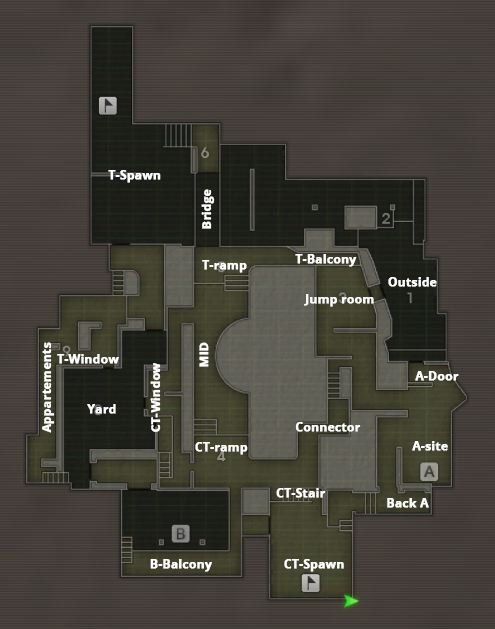
<style>
.page{position:relative;width:495px;height:629px}
.page>*{position:absolute;margin:0}
.t1{font:12px "OpenSans-Bold";color:#ffffff;font-weight:bold}
</style>
<div class="page">
<p class="t1" style="left:108px;top:170px;width:53px;height:13px">T-Spawn</p>
<p class="t1" style="left:201px;top:189px;width:14px;height:40px;rotate:-90deg">Bridge</p>
<p class="t1" style="left:295px;top:254px;width:62px;height:13px">T-Balcony</p>
<p class="t1" style="left:202px;top:260px;width:45px;height:13px">T-ramp</p>
<p class="t1" style="left:388px;top:277px;width:49px;height:10px">Outside</p>
<p class="t1" style="left:304px;top:294px;width:70px;height:13px">Jump room</p>
<p class="t1" style="left:42px;top:342px;width:13px;height:91px;rotate:-90deg">Appartements</p>
<p class="t1" style="left:199px;top:342px;width:10px;height:25px;rotate:-90deg">MID</p>
<p class="t1" style="left:57px;top:354px;width:62px;height:10px">T-Window</p>
<p class="t1" style="left:150px;top:363px;width:11px;height:69px;rotate:-90deg">CT-Window</p>
<p class="t1" style="left:415px;top:371px;width:44px;height:10px">A-Door</p>
<p class="t1" style="left:87px;top:404px;width:29px;height:10px">Yard</p>
<p class="t1" style="left:295px;top:422px;width:66px;height:10px">Connector</p>
<p class="t1" style="left:195px;top:442px;width:53px;height:13px">CT-ramp</p>
<p class="t1" style="left:412px;top:441px;width:36px;height:10px">A-site</p>
<p class="t1" style="left:276px;top:488px;width:50px;height:10px">CT-Stair</p>
<p class="t1" style="left:387px;top:498px;width:42px;height:10px">Back A</p>
<p class="t1" style="left:150px;top:559px;width:62px;height:13px">B-Balcony</p>
<p class="t1" style="left:284px;top:559px;width:60px;height:13px">CT-Spawn</p>
</div>
